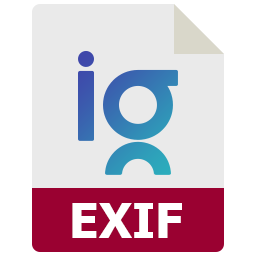
<style>
.page{position:relative;width:256px;height:256px;background:#eaeaea}
.page>*{position:absolute;margin:0}
.t1{font:48px "Tahoma-Bold";color:#ffffff}
</style>
<div class="page">
<p class="t1" style="left:72px;top:203px;width:110px;height:35px">EXIF</p>
</div>
